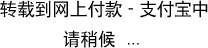
<style>
.page{position:relative;width:208px;height:48px;background:#ffffff}
.page>*{position:absolute;margin:0}
.t1{font:18px/30px "DFPHeiW5-GB5";letter-spacing:-0.025em;color:#000000}
.t2{font:18px/30px "ArialMT";letter-spacing:-0.025em;color:#000000}
</style>
<div class="page">
<p class="t1" style="left:0px;top:0px;width:208px;height:48px;text-align:center">轉載到網上付款 - 支付寶中<br>請稍候  <span class="t2">...</span></p>
</div>
